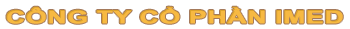
<style>
.page{position:relative;width:350px;height:29px;background:#ffffff}
.page>*{position:absolute;margin:0}
.t1{font:17.9px "Arial-BoldMT";letter-spacing:-0.005em;color:#f7b942;font-weight:bold;scale:1.49 1}
</style>
<div class="page">
<p class="t1" style="left:6px;top:6px;width:337px;height:18px">CÔNG TY CỔ PHẦN IMED</p>
</div>
